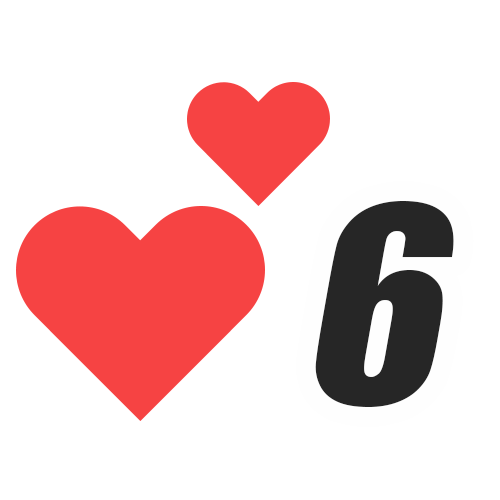
<style>
.page{position:relative;width:500px;height:500px;background:#ffffff}
.page>*{position:absolute;margin:0}
.t1{font:250px "Impact";color:#262626;font-style:italic}
</style>
<div class="page">
<p class="t1" style="left:315px;top:201px;width:139px;height:206px">6</p>
</div>
